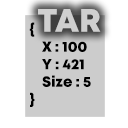
<style>
.page{position:relative;width:128px;height:128px;background:#ffffff}
.page>*{position:absolute;margin:0}
.t1{font:32.3px "Mont-HeavyDEMO";color:#cfcfcf}
.t2{font:14.6px "Mont-HeavyDEMO";color:#000000}
</style>
<div class="page">
<p class="t1" style="left:38px;top:9px;width:63px;height:23px">TAR</p>
<p class="t2" style="left:29px;top:22px;width:62px;height:85px">{<br>    X : 100<br>    Y : 421<br>    Size : 5<br>}</p>
</div>
